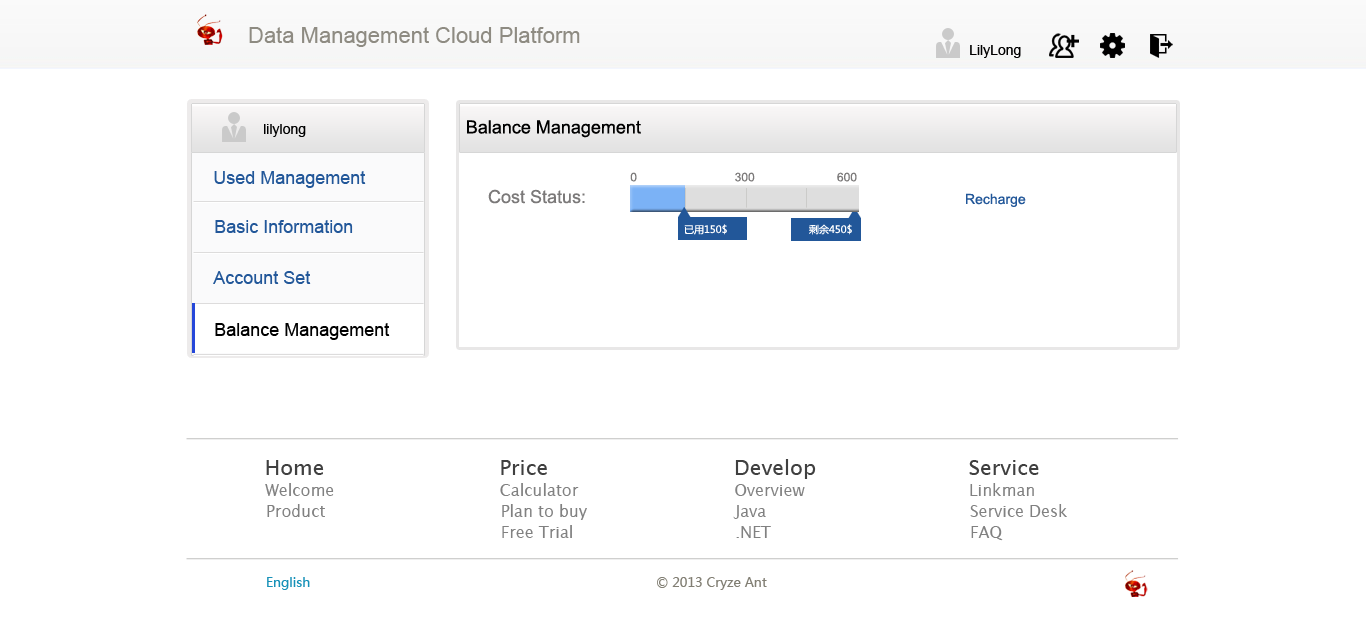
<style>
.page{position:relative;width:1366px;height:628px;background:#ffffff}
.page>*{position:absolute;margin:0}
.t1{font:22px "ArialMT";color:#8e8b82}
.t2{font:14px "ArialMT";color:#000000}
.t3{font:18px "ArialMT";color:#000000}
.t4{font:18px "ArialMT";color:#225799}
.t5{font:12px "ArialMT";color:#7b7979}
.t6{font:18px "ArialMT";color:#7b7979}
.t7{font:14px "ArialMT";color:#225799}
.t8{font:10px "MicrosoftYaHei";color:#ffffff}
.t9{font:21px "LucidaSans";color:#404040}
.t10{font:21px "LucidaSans";color:#3f3f3f}
.t11{font:16px "LucidaSans";color:#818181}
.t12{font:13px "MicrosoftYaHei";color:#1791b8}
.t13{font:13px "MicrosoftYaHei";color:#827f74}
</style>
<div class="page">
<p class="t1" style="left:249px;top:27px;width:331px;height:20px">Data Management Cloud Platform</p>
<p class="t2" style="left:970px;top:45px;width:51px;height:13px">LilyLong</p>
<p class="t2" style="left:264px;top:124px;width:42px;height:13px">lilylong</p>
<p class="t3" style="left:467px;top:120px;width:174px;height:18px">Balance Management</p>
<p class="t4" style="left:214px;top:171px;width:152px;height:17px">Used Management</p>
<p class="t5" style="left:630px;top:172px;width:7px;height:10px">0</p>
<p class="t5" style="left:735px;top:172px;width:20px;height:10px">300</p>
<p class="t5" style="left:837px;top:172px;width:20px;height:10px">600</p>
<p class="t6" style="left:488px;top:189px;width:97px;height:15px">Cost Status:</p>
<p class="t7" style="left:966px;top:193px;width:60px;height:14px">Recharge</p>
<p class="t4" style="left:215px;top:220px;width:138px;height:13px">Basic Information</p>
<p class="t8" style="left:684px;top:224px;width:43px;height:11px">已用150$</p>
<p class="t8" style="left:809px;top:224px;width:43px;height:11px">剩余450$</p>
<p class="t4" style="left:213px;top:271px;width:98px;height:13px">Account Set</p>
<p class="t3" style="left:215px;top:323px;width:175px;height:17px">Balance Management</p>
<p class="t9" style="left:266px;top:460px;width:58px;height:15px">Home</p>
<p class="t10" style="left:501px;top:460px;width:46px;height:15px">Price</p>
<p class="t9" style="left:735px;top:459px;width:81px;height:20px">Develop</p>
<p class="t10" style="left:969px;top:460px;width:70px;height:15px">Service</p>
<p class="t11" style="left:265px;top:483px;width:69px;height:13px">Welcome</p>
<p class="t11" style="left:500px;top:483px;width:79px;height:13px">Calculator</p>
<p class="t11" style="left:735px;top:484px;width:70px;height:12px">Overview</p>
<p class="t11" style="left:970px;top:483px;width:64px;height:13px">Linkman</p>
<p class="t11" style="left:267px;top:504px;width:58px;height:13px">Product</p>
<p class="t11" style="left:502px;top:504px;width:85px;height:16px">Plan to buy</p>
<p class="t11" style="left:733px;top:505px;width:33px;height:14px">Java</p>
<p class="t11" style="left:970px;top:504px;width:97px;height:13px">Service Desk</p>
<p class="t11" style="left:502px;top:525px;width:70px;height:13px">Free Trial</p>
<p class="t11" style="left:736px;top:526px;width:35px;height:12px">.NET</p>
<p class="t11" style="left:971px;top:526px;width:32px;height:15px">FAQ</p>
<p class="t12" style="left:267px;top:577px;width:43px;height:13px">English</p>
<p class="t13" style="left:657px;top:577px;width:110px;height:13px">© 2013 Cryze Ant</p>
</div>
